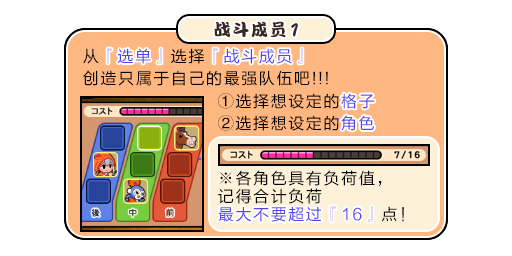
<style>
.page{position:relative;width:512px;height:256px;background:#ffffff}
.page>*{position:absolute;margin:0}
.t1{font:17px "DFPKanTingLiuW9";letter-spacing:0.1em;color:#3b2626}
.t2{font:19.5px "DFPKanTingLiuW9";letter-spacing:0.1em;color:#3b2626;scale:0.87 1}
.t3{font:16px/22px "FZLTHJW--GB1-0";letter-spacing:0.1em;color:#000000}
.t4{font:16px/22px "FZLTHJW--GB1-0";letter-spacing:0.1em;color:#5444ed}
.t5{font:16px "FZLTHJW--GB1-0";letter-spacing:0.1em;color:#5444ed}
.t6{font:16px/18px "FZLTHJW--GB1-0";letter-spacing:0.1em;color:#000000}
.t7{font:16px/18px "FZLTHJW--GB1-0";letter-spacing:0.1em;color:#5444ed}
</style>
<div class="page">
<p class="t1" style="left:214px;top:21px;width:84px;height:17px">战斗成员<span class="t2">1</span></p>
<p class="t3" style="left:83px;top:48px;width:245px;height:38px">从<span class="t4">『选单』</span>选择<span class="t4">『战斗成员』<br></span>创造只属于自己的最强队伍吧!!!</p>
<p class="t5" style="left:107px;top:48px;width:55px;height:16px">『选单』</p>
<p class="t5" style="left:213px;top:48px;width:90px;height:16px">『战斗成员』</p>
<p class="t3" style="left:218px;top:93px;width:157px;height:38px">①选择想设定的<span class="t4">格子<br></span>②选择想设定的<span class="t4">角色</span></p>
<p class="t5" style="left:341px;top:93px;width:34px;height:16px">格子</p>
<p class="t5" style="left:341px;top:115px;width:33px;height:16px">角色</p>
<p class="t6" style="left:218px;top:170px;width:186px;height:52px">※各角色具有负荷值，<br>记得合计负荷<br><span class="t7">最大不要超过『16』</span>点！</p>
<p class="t5" style="left:218px;top:206px;width:155px;height:16px">最大不要超过『16』</p>
</div>
